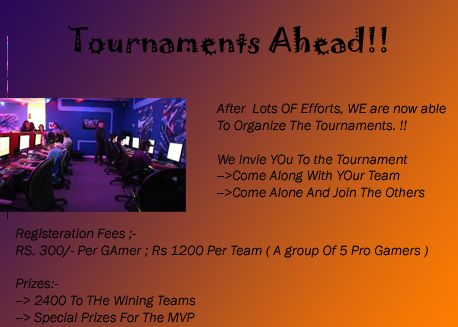
<style>
.page{position:relative;width:458px;height:327px}
.page>*{position:absolute;margin:0}
.t1{font:30px "Jokerman-Regular";color:#000000}
.t2{font:14px "FranklinGothic-BookItalic";color:#000000}
</style>
<div class="page">
<p class="t1" style="left:68px;top:25px;width:319px;height:31px">Tournaments Ahead!!</p>
<p class="t2" style="left:216px;top:103px;width:230px;height:95px">After  Lots OF Efforts, WE are now able <br>To Organize The Tournaments. !!<br><br>We Invie YOu To the Tournament<br>--&gt;Come Along With YOur Team<br>--&gt;Come Alone And Join The Others</p>
<p class="t2" style="left:15px;top:228px;width:413px;height:97px">Registeration Fees ;-<br>RS. 300/- Per GAmer ; Rs 1200 Per Team ( A group Of 5 Pro Gamers )<br><br>Prizes:-<br>--&gt; 2400 To THe Wining Teams<br>--&gt; Special Prizes For The MVP</p>
</div>
